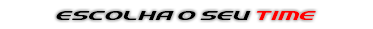
<style>
.page{position:relative;width:373px;height:29px;background:#ffffff}
.page>*{position:absolute;margin:0}
.t1{font:14px "QuickExpress";color:#010101;scale:1.15 1}
.t2{font:14px "QuickExpress";color:#ff0000;scale:1.15 1}
</style>
<div class="page">
<p class="t1" style="left:56px;top:11px;width:260px;height:9px">ESCOLHA O SEU <span class="t2">TIME</span></p>
</div>
